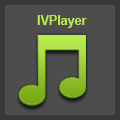
<style>
.page{position:relative;width:120px;height:120px;background:#4d4d4d}
.page>*{position:absolute;margin:0}
.t1{font:12.5px "Arial-BoldMT";color:#b9ed4f}
</style>
<div class="page">
<p class="t1" style="left:37px;top:15px;width:50px;height:13px">IVPlayer</p>
</div>
